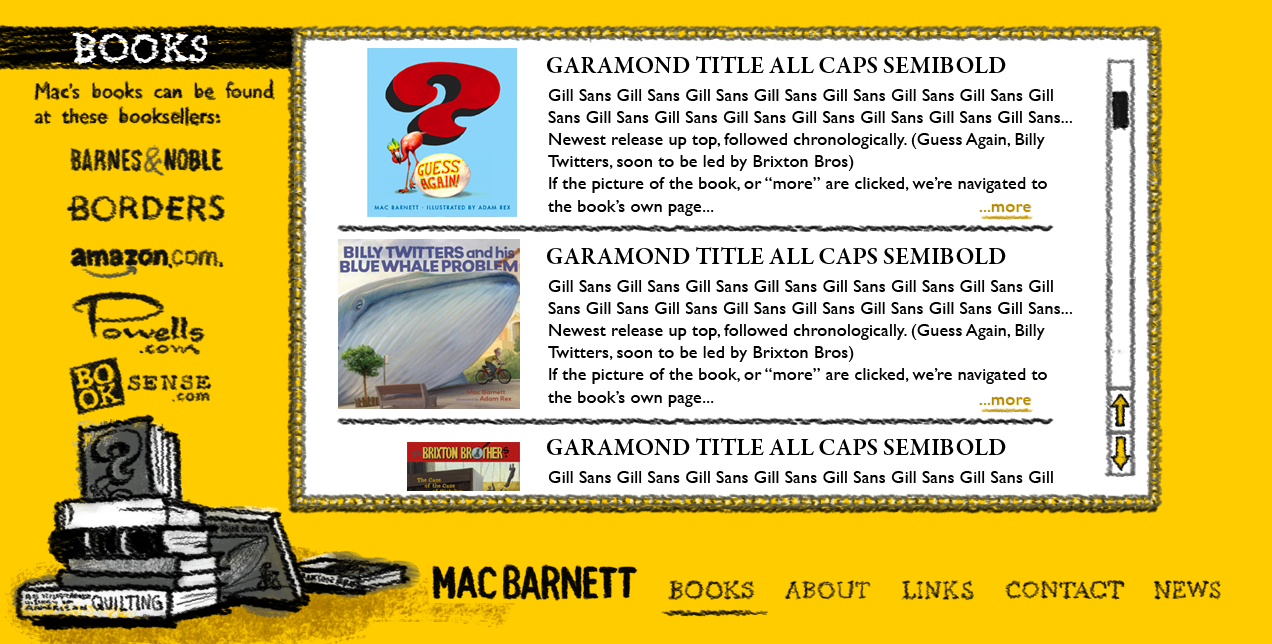
<style>
.page{position:relative;width:1272px;height:644px;background:#ffcc00}
.page>*{position:absolute;margin:0}
.t1{font:24px "GaramondPremrPro-Smbd";color:#000000}
.t2{font:18.4px "GillSans";color:#000000}
</style>
<div class="page">
<p class="t1" style="left:547px;top:56px;width:459px;height:17px">GARAMOND TITLE ALL CAPS SEMIBOLD</p>
<p class="t2" style="left:548px;top:89px;width:524px;height:127px">Gill Sans Gill Sans Gill Sans Gill Sans Gill Sans Gill Sans Gill Sans Gill <br>Sans Gill Sans Gill Sans Gill Sans Gill Sans Gill Sans Gill Sans Gill Sans...<br>Newest release up top, followed chronologically. (Guess Again, Billy <br>Twitters, soon to be led by Brixton Bros)<br>If the picture of the book, or “more” are clicked, we’re navigated to <br>the book’s own page...</p>
<p class="t1" style="left:547px;top:247px;width:459px;height:17px">GARAMOND TITLE ALL CAPS SEMIBOLD</p>
<p class="t2" style="left:548px;top:280px;width:524px;height:127px">Gill Sans Gill Sans Gill Sans Gill Sans Gill Sans Gill Sans Gill Sans Gill <br>Sans Gill Sans Gill Sans Gill Sans Gill Sans Gill Sans Gill Sans Gill Sans...<br>Newest release up top, followed chronologically. (Guess Again, Billy <br>Twitters, soon to be led by Brixton Bros)<br>If the picture of the book, or “more” are clicked, we’re navigated to <br>the book’s own page...</p>
<p class="t1" style="left:547px;top:438px;width:459px;height:17px">GARAMOND TITLE ALL CAPS SEMIBOLD</p>
</div>
